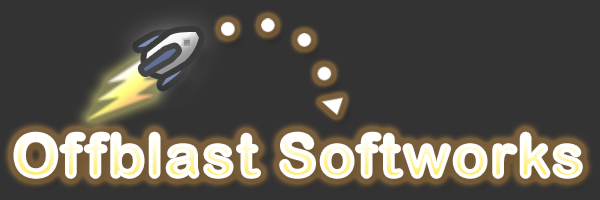
<style>
.page{position:relative;width:600px;height:200px;background:#333333}
.page>*{position:absolute;margin:0}
.t1{font:58px "ArialRoundedMTBold";letter-spacing:0.05em}
</style>
<div class="page">
<p class="t1" style="left:15px;top:133px;width:566px;height:44px">Offblast Softworks</p>
</div>
